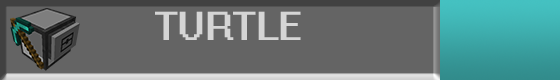
<style>
.page{position:relative;width:560px;height:80px;background:#646464}
.page>*{position:absolute;margin:0}
.t1{font:36px "System";color:#d5d5d5}
</style>
<div class="page">
<p class="t1" style="left:155px;top:11px;width:146px;height:29px">TURTLE</p>
</div>
